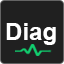
<style>
.page{position:relative;width:64px;height:64px;background:#202020}
.page>*{position:absolute;margin:0}
.t1{font:24px "Arial-BoldMT";color:#ffffff}
</style>
<div class="page">
<p class="t1" style="left:6px;top:23px;width:50px;height:22px">Diag</p>
</div>
